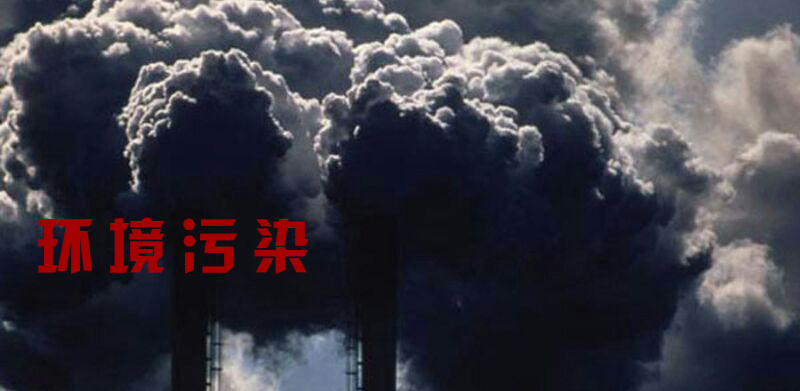
<style>
.page{position:relative;width:800px;height:391px}
.page>*{position:absolute;margin:0}
.t1{font:60px "HYk2gj";letter-spacing:0.2em;color:#a40000}
</style>
<div class="page">
<p class="t1" style="left:38px;top:217px;width:271px;height:57px">环境污染</p>
</div>
